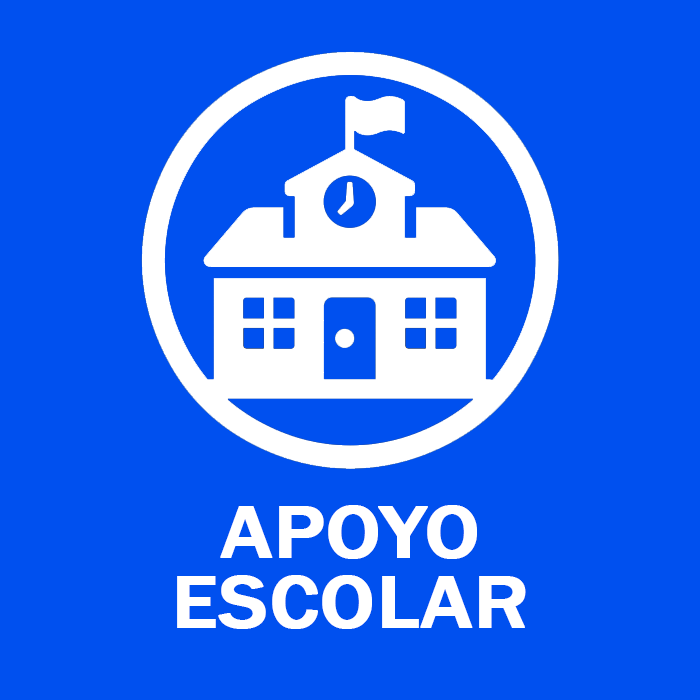
<style>
.page{position:relative;width:700px;height:700px;background:#0050ef}
.page>*{position:absolute;margin:0}
.t1{font:77px/70px "FranklinGothic-Medium";color:#ffffff;font-weight:bold;scale:1.09 1}
</style>
<div class="page">
<p class="t1" style="left:177px;top:505px;width:349px;height:124px;text-align:center">APOYO<br>ESCOLAR</p>
</div>
